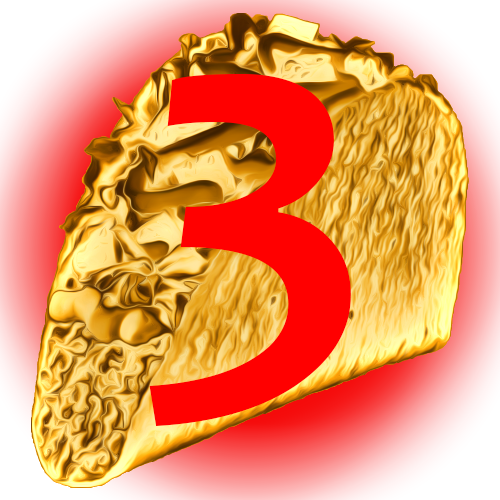
<style>
.page{position:relative;width:500px;height:500px}
.page>*{position:absolute;margin:0}
.t1{font:493.9px "Candara-Bold";color:#ff0000}
</style>
<div class="page">
<p class="t1" style="left:149px;top:74px;width:202px;height:352px">3</p>
</div>
